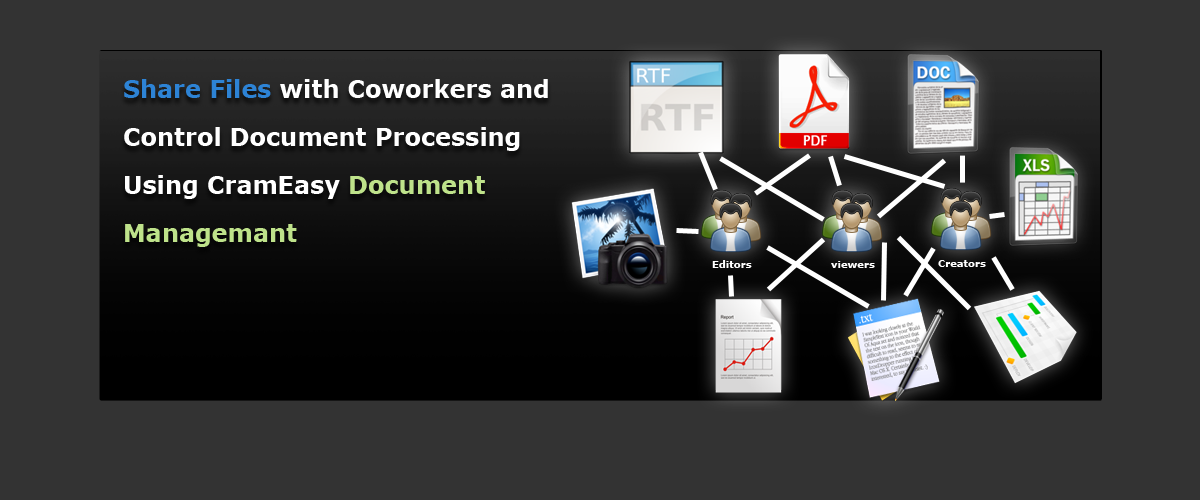
<style>
.page{position:relative;width:1200px;height:500px;background:#333333}
.page>*{position:absolute;margin:0}
.t1{font:24px/48px "Verdana-Bold";color:#ffffff}
.t2{font:24px/48px "Verdana-Bold";color:#2d83d5}
.t3{font:24px/48px "Verdana-Bold";color:#bee28a}
.t4{font:10px "Verdana-Bold";color:#ffffff}
</style>
<div class="page">
<p class="t1" style="left:124px;top:79px;width:424px;height:168px"><span class="t2">Share Files</span> with Coworkers and<br>Control Document Processing<br>Using CramEasy <span class="t3">Document<br>Managemant</span></p>
<p class="t4" style="left:712px;top:260px;width:40px;height:8px">Editors</p>
<p class="t4" style="left:831px;top:261px;width:44px;height:7px">viewers</p>
<p class="t4" style="left:938px;top:260px;width:48px;height:7px">Creators</p>
</div>
